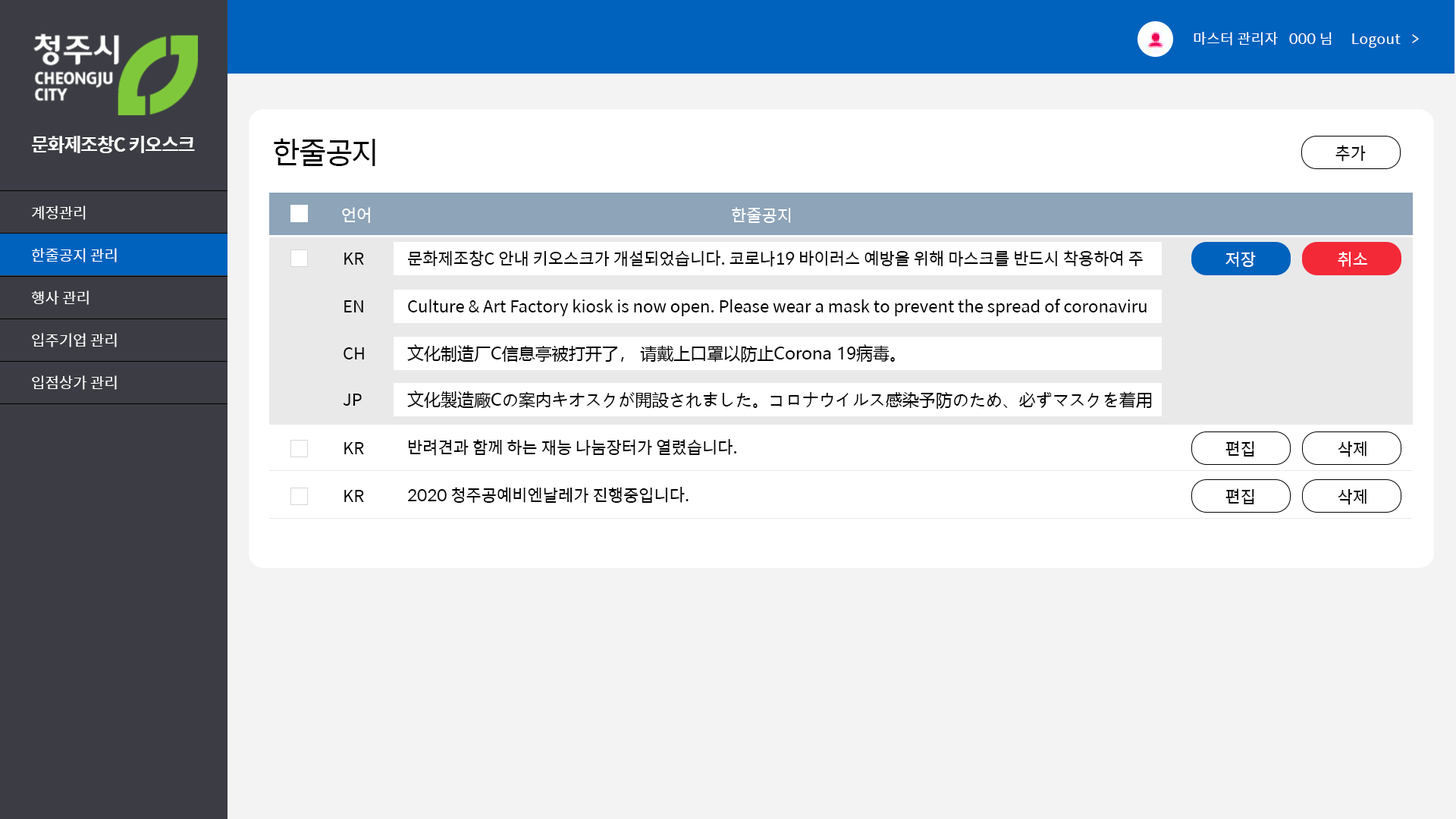
<style>
.page{position:relative;width:1456px;height:819px;background:#f3f3f3}
.page>*{position:absolute;margin:0}
.t1{font:14.4px "SpoqaHanSans-Regular";letter-spacing:0.025em;color:#ffffff}
.t2{font:19px "SpoqaHanSans-Bold";letter-spacing:-0.05em;color:#ffffff}
.t3{font:30.3px "SpoqaHanSans-Regular";letter-spacing:-0.05em;color:#000000}
.t4{font:16.7px "SpoqaHanSans-Regular";color:#000000}
.t5{font:15.2px/42.5px "SpoqaHanSans-Regular";color:#ffffff}
.t6{font:16.7px "SpoqaHanSans-Regular";color:#ffffff}
.t7{font:16.7px "MicrosoftYaHeiUI";color:#000000}
</style>
<div class="page">
<p class="t1" style="left:1194px;top:32px;width:225px;height:16px">마스터 관리자   000 님     Logout   &gt;</p>
<p class="t2" style="left:32px;top:136px;width:163px;height:17px">문화제조창C 키오스크</p>
<p class="t3" style="left:274px;top:138px;width:101px;height:28px">한줄공지</p>
<p class="t4" style="left:1335px;top:145px;width:31px;height:17px">추가</p>
<p class="t5" style="left:31px;top:206px;width:86px;height:184px">계정관리<br>한줄공지 관리<br>행사 관리<br>입주기업 관리<br>입점상가 관리</p>
<p class="t6" style="left:342px;top:207px;width:28px;height:16px">언어</p>
<p class="t6" style="left:732px;top:207px;width:59px;height:16px">한줄공지</p>
<p class="t4" style="left:344px;top:253px;width:20px;height:12px">KR</p>
<p class="t4" style="left:408px;top:250px;width:735px;height:17px">문화제조창C 안내 키오스크가 개설되었습니다. 코로나19 바이러스 예방을 위해 마스크를 반드시 착용하여 주</p>
<p class="t6" style="left:1225px;top:252px;width:31px;height:15px">저장</p>
<p class="t6" style="left:1338px;top:252px;width:29px;height:15px">취소</p>
<p class="t4" style="left:344px;top:300px;width:19px;height:12px">EN</p>
<p class="t4" style="left:408px;top:299px;width:739px;height:17px">Culture &amp; Art Factory kiosk is now open. Please wear a mask to prevent the spread of coronaviru</p>
<p class="t4" style="left:344px;top:347px;width:20px;height:12px">CH</p>
<p class="t7" style="left:407px;top:344px;width:488px;height:18px">文化制造厂C信息亭被打开了， 请戴上口罩以防止Corona 19病毒。</p>
<p class="t4" style="left:343px;top:394px;width:19px;height:12px">JP</p>
<p class="t7" style="left:407px;top:391px;width:745px;height:18px">文化製造廠Cの案内キオスクが開設されました。コロナウイルス感染予防のため、必ずマスクを着用</p>
<p class="t4" style="left:344px;top:442px;width:20px;height:12px">KR</p>
<p class="t4" style="left:408px;top:439px;width:329px;height:17px">반려견과 함께 하는 재능 나눔장터가 열렸습니다.</p>
<p class="t4" style="left:1225px;top:441px;width:29px;height:16px">편집</p>
<p class="t4" style="left:1338px;top:441px;width:28px;height:16px">삭제</p>
<p class="t4" style="left:344px;top:490px;width:20px;height:12px">KR</p>
<p class="t4" style="left:408px;top:487px;width:281px;height:16px">2020 청주공예비엔날레가 진행중입니다.</p>
<p class="t4" style="left:1225px;top:488px;width:29px;height:16px">편집</p>
<p class="t4" style="left:1338px;top:489px;width:28px;height:16px">삭제</p>
</div>
